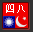
<style>
.page{position:relative;width:33px;height:32px;background:#f20000}
.page>*{position:absolute;margin:0}
.t1{font:10.4px "SimSun";color:#ffffff}
</style>
<div class="page">
<p class="t1" style="left:6px;top:4px;width:19px;height:9px">四八</p>
</div>
